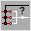
<style>
.page{position:relative;width:31px;height:31px;background:#acacac}
.page>*{position:absolute;margin:0}
.t1{font:9px "ArialMT";color:#000000}
</style>
<div class="page">
<p class="t1" style="left:20px;top:7px;width:5px;height:7px">?</p>
</div>
